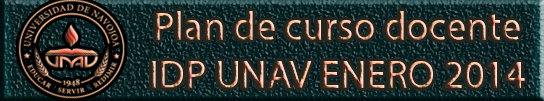
<style>
.page{position:relative;width:544px;height:101px}
.page>*{position:absolute;margin:0}
.t1{font:40px "MyriadPro-Regular"}
</style>
<div class="page">
<p class="t1" style="left:152px;top:11px;width:373px;height:77px;text-align:center">Plan de curso docente<br>IDP UNAV ENERO 2014</p>
</div>
